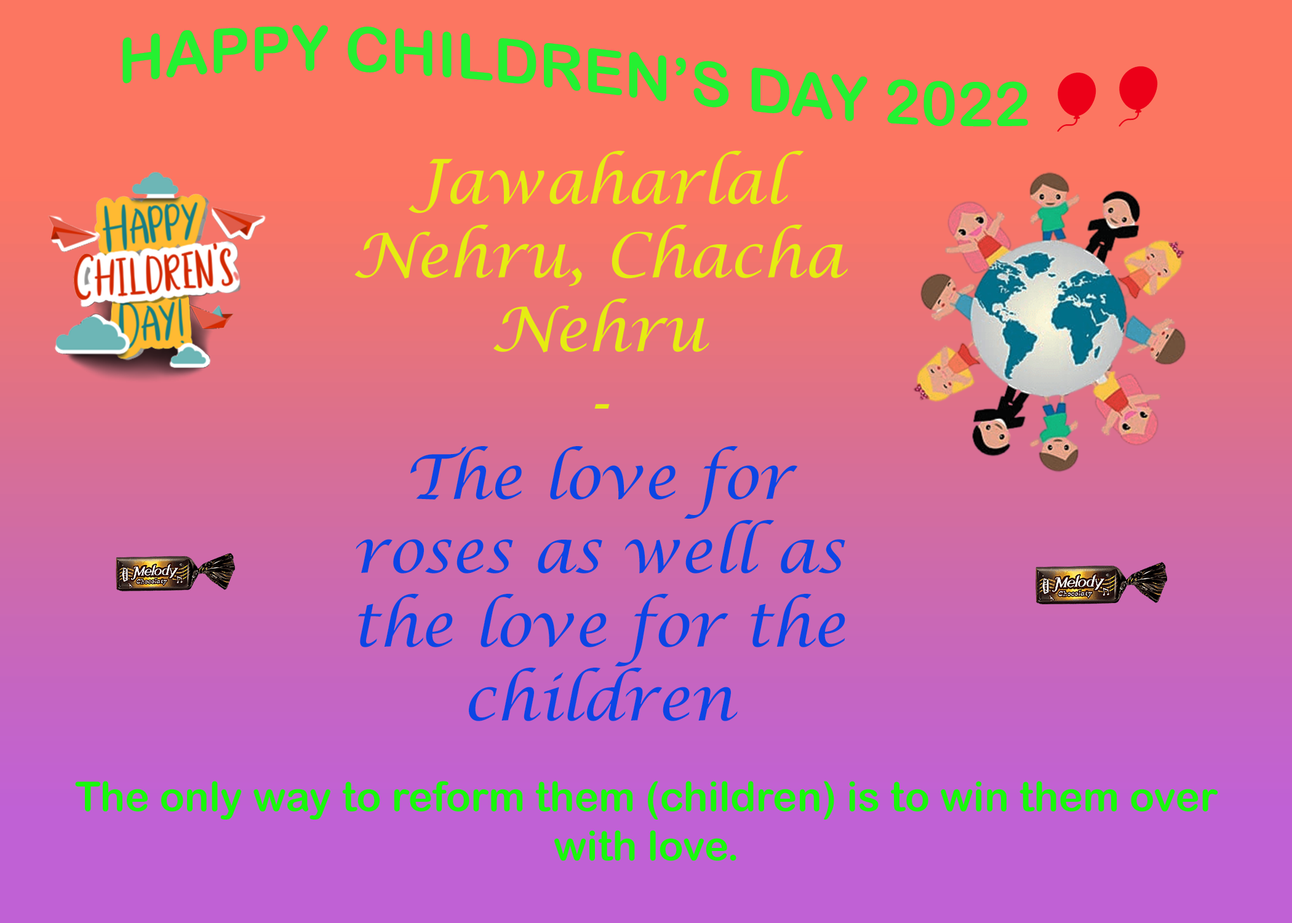
<style>
.page{position:relative;width:1292px;height:923px}
.page>*{position:absolute;margin:0}
.t1{font:61.5px "ArialRoundedMTBold";color:#2dfa3c}
.t2{font:61.5px "EmojiOneColor";color:#f8001d}
.t3{font:61.5px "LucidaCalligraphy-Italic";color:#0f55f4}
.t4{font:61.5px "LucidaCalligraphy-Italic";color:#f5f816}
.t5{font:41px "ArialRoundedMTBold";color:#1efd0d}
</style>
<div class="page">
<p class="t1" style="left:122px;top:25px;width:1036px;height:107px;text-align:center">HAPPY CHILDREN’S DAY 2022 <span class="t2">🎈🎈</span></p>
<p class="t3" style="left:354px;top:151px;width:494px;height:570px;text-align:center"><span class="t4">Jawaharlal Nehru, Chacha Nehru<br>-<br></span>The love for roses as well as the love for the children</p>
<p class="t5" style="left:75px;top:781px;width:1143px;height:80px;text-align:center">The only way to reform them (children) is to win them over with love.</p>
</div>
